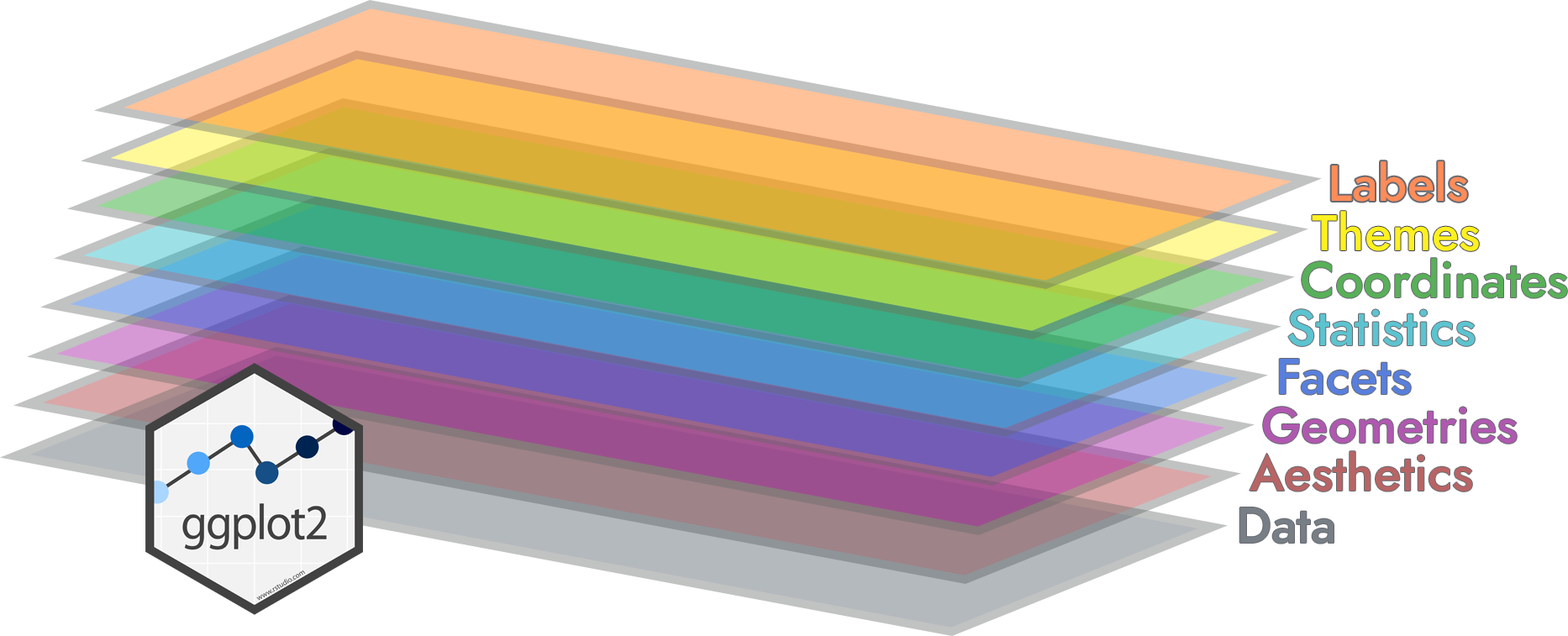
<style>
.page{position:relative;width:1568px;height:636px;background:#ffffff}
.page>*{position:absolute;margin:0}
.t1{font:50.4px "Jost-Medium";color:#ff8c58}
.t2{font:50.4px "Jost-Medium";color:#fff11f}
.t3{font:50.4px "Jost-Medium";color:#58b058}
.t4{font:50.4px "Jost-Medium";color:#5cc4d0}
.t5{font:50.4px "Jost-Medium";color:#587fdd}
.t6{font:50.4px "Jost-Medium";color:#b058b0}
.t7{font:50.4px "Jost-Medium";color:#b86465}
.t8{font:50.4px "Jost-Medium";color:#777e85}
</style>
<div class="page">
<p class="t1" style="left:1331px;top:161px;width:136px;height:41px">Labels</p>
<p class="t2" style="left:1312px;top:211px;width:167px;height:40px">Themes</p>
<p class="t3" style="left:1302px;top:258px;width:265px;height:40px">Coordinates</p>
<p class="t4" style="left:1288px;top:309px;width:187px;height:37px">Statistics</p>
<p class="t5" style="left:1279px;top:359px;width:132px;height:36px">Facets</p>
<p class="t6" style="left:1263px;top:407px;width:254px;height:37px">Geometries</p>
<p class="t7" style="left:1250px;top:451px;width:222px;height:41px">Aesthetics</p>
<p class="t8" style="left:1239px;top:508px;width:95px;height:36px">Data</p>
</div>
